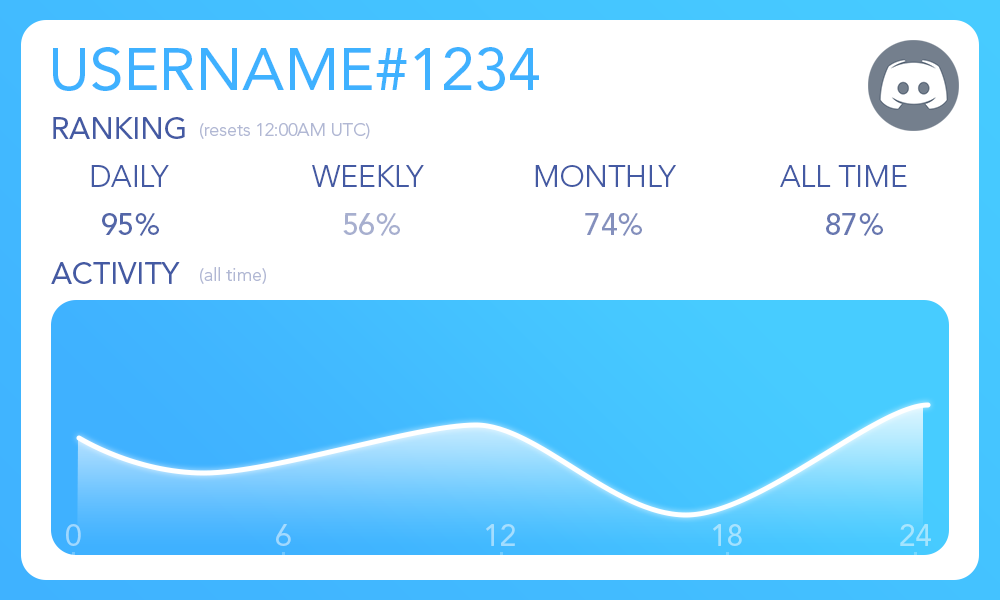
<style>
.page{position:relative;width:1000px;height:600px;background:#ffffff}
.page>*{position:absolute;margin:0}
.t1{font:60px "AvenirLTPro-Roman";color:#3fb1ff}
.t2{font:30px "AvenirLTPro-Roman";color:#445aa3;text-transform:uppercase}
.t3{font:18px "AvenirLTPro-Light";color:#b1b8d4}
.t4{font:30px "AvenirLTPro-Light";color:#445aa3;text-transform:uppercase}
.t5{font:30px "AvenirLTPro-Medium";color:#445aa3;text-transform:uppercase}
.t6{font:30px "AvenirLTPro-Medium";color:#a7afcf;text-transform:uppercase}
.t7{font:30px "AvenirLTPro-Medium";color:#8490bd;text-transform:uppercase}
.t8{font:30px "AvenirLTPro-Medium";color:#6777b0;text-transform:uppercase}
.t9{font:30px "AvenirLTPro-Roman";color:#9fd8fe}
.t10{font:30px "AvenirLTPro-Roman";color:#a2d9fe}
.t11{font:30px "AvenirLTPro-Roman";color:#a4ddfe}
.t12{font:30px "AvenirLTPro-Roman";color:#a5e2fe}
.t13{font:30px "AvenirLTPro-Roman";color:#a3e5fe}
</style>
<div class="page">
<p class="t1" style="left:53px;top:47px;width:486px;height:44px">USERNAME#1234</p>
<p class="t2" style="left:53px;top:117px;width:132px;height:22px">ranking</p>
<p class="t3" style="left:200px;top:123px;width:170px;height:16px">(resets 12:00AM UTC)</p>
<p class="t4" style="left:91px;top:165px;width:78px;height:22px">daily</p>
<p class="t4" style="left:312px;top:165px;width:112px;height:22px">weekly</p>
<p class="t4" style="left:535px;top:165px;width:141px;height:22px">monthly</p>
<p class="t4" style="left:780px;top:165px;width:127px;height:22px">all time</p>
<p class="t5" style="left:102px;top:213px;width:57px;height:23px;opacity:0.95">95%</p>
<p class="t6" style="left:343px;top:213px;width:57px;height:23px">56%</p>
<p class="t7" style="left:585px;top:213px;width:57px;height:23px">74%</p>
<p class="t8" style="left:826px;top:213px;width:57px;height:23px">87%</p>
<p class="t2" style="left:51px;top:262px;width:129px;height:22px">activity</p>
<p class="t3" style="left:200px;top:267px;width:66px;height:17px">(all time)</p>
<p class="t9" style="left:66px;top:524px;width:15px;height:22px">0</p>
<p class="t10" style="left:276px;top:524px;width:15px;height:22px">6</p>
<p class="t11" style="left:486px;top:524px;width:29px;height:22px">12</p>
<p class="t12" style="left:713px;top:524px;width:29px;height:22px">18</p>
<p class="t13" style="left:900px;top:524px;width:31px;height:22px">24</p>
</div>
